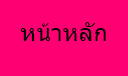
<style>
.page{position:relative;width:128px;height:76px;background:#ff0072}
.page>*{position:absolute;margin:0}
.t1{font:24px "Tahoma";color:#000203}
</style>
<div class="page">
<p class="t1" style="left:20px;top:22px;width:86px;height:19px">หน้าหลัก</p>
</div>
